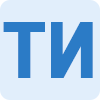
<style>
.page{position:relative;width:100px;height:100px;background:#e1eefb}
.page>*{position:absolute;margin:0}
.t1{font:77.3px "ArialNarrow-Bold";color:#2b7bc6;font-weight:bold;scale:1.09 1}
</style>
<div class="page">
<p class="t1" style="left:3px;top:22px;width:90px;height:56px">ТИ</p>
</div>
